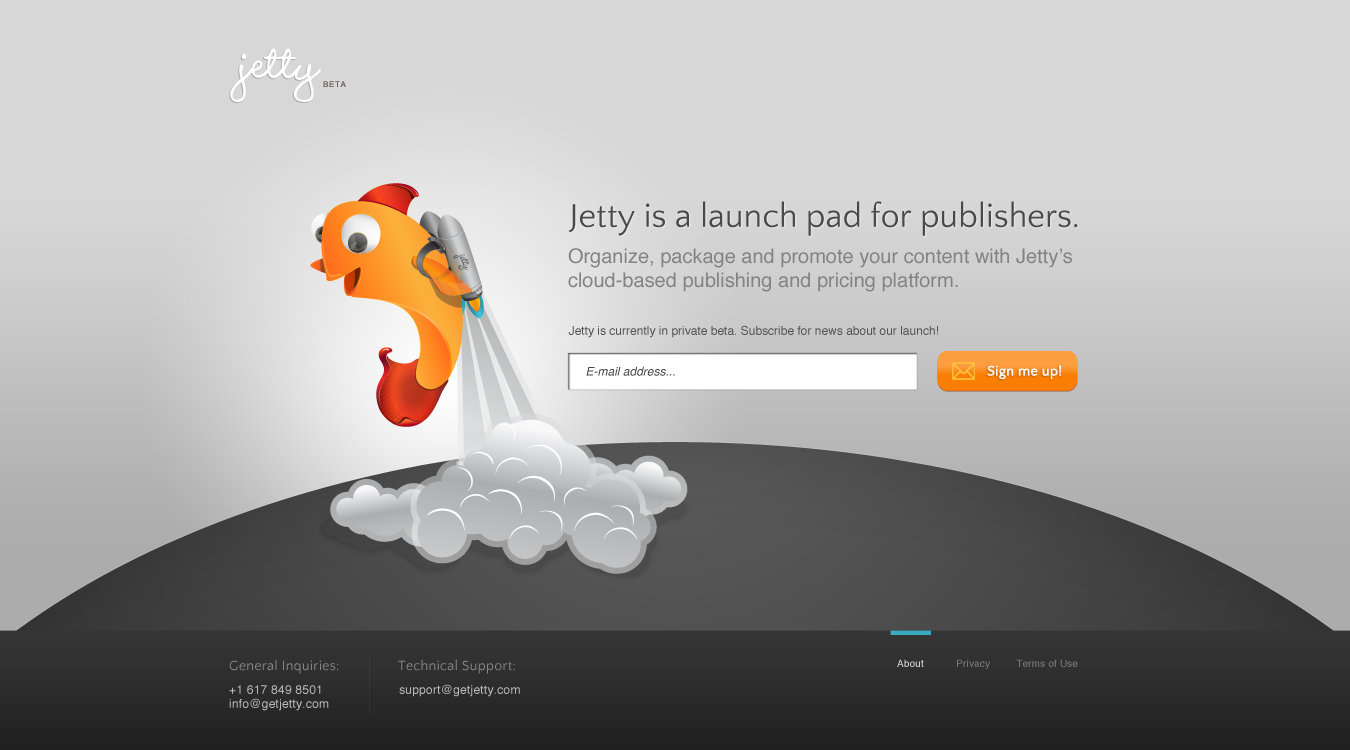
<style>
.page{position:relative;width:1350px;height:750px;background:#d7d7d7}
.page>*{position:absolute;margin:0}
.t1{font:66px "WendyLPStd-Bold";letter-spacing:0.015em;color:#ffffff}
.t2{font:8px "Helvetica";letter-spacing:0.08em;color:#717171}
.t3{font:34px "QuattrocentoSans";color:#494949}
.t4{font:20px "Helvetica";color:#838383}
.t5{font:12px "Helvetica";color:#525252}
.t6{font:12px "Helvetica-Oblique";color:#484747}
.t7{font:14px "QuattrocentoSans";color:#fbf8f3;font-weight:bold}
.t8{font:14px "QuattrocentoSans";letter-spacing:0.02em;color:#888888}
.t9{font:10px "Helvetica";letter-spacing:0.015em;color:#7b7b7b}
.t10{font:10px "Helvetica";letter-spacing:0.015em;color:#d7d7d7}
.t11{font:12px/14px "Helvetica";letter-spacing:0.02em;color:#bcbcbc}
.t12{font:12px "Helvetica";letter-spacing:0.02em;color:#bcbcbc}
</style>
<div class="page">
<p class="t1" style="left:229px;top:48px;width:92px;height:55px">jetty</p>
<p class="t2" style="left:323px;top:81px;width:23px;height:6px">BETA</p>
<p class="t3" style="left:569px;top:201px;width:509px;height:35px">Jetty is a launch pad for publishers.</p>
<p class="t4" style="left:568px;top:248px;width:504px;height:44px">Organize, package and promote your content with Jetty’s cloud-based publishing and pricing platform.</p>
<p class="t5" style="left:568px;top:325px;width:370px;height:13px">Jetty is currently in private beta. Subscribe for news about our launch!</p>
<p class="t6" style="left:586px;top:366px;width:89px;height:10px">E-mail address...</p>
<p class="t7" style="left:987px;top:365px;width:74px;height:15px">Sign me up!</p>
<p class="t7" style="left:987px;top:365px;width:74px;height:15px">Sign me up!</p>
<p class="t8" style="left:229px;top:659px;width:110px;height:15px">General Inquiries:</p>
<p class="t8" style="left:398px;top:659px;width:117px;height:15px">Technical Support:</p>
<p class="t9" style="left:897px;top:659px;width:181px;height:10px"><span class="t10">About</span>           Privacy         Terms of Use</p>
<p class="t11" style="left:229px;top:685px;width:100px;height:26px">+1 617 849 8501            <br>info@getjetty.com</p>
<p class="t12" style="left:399px;top:684px;width:121px;height:13px">support@getjetty.com</p>
</div>
